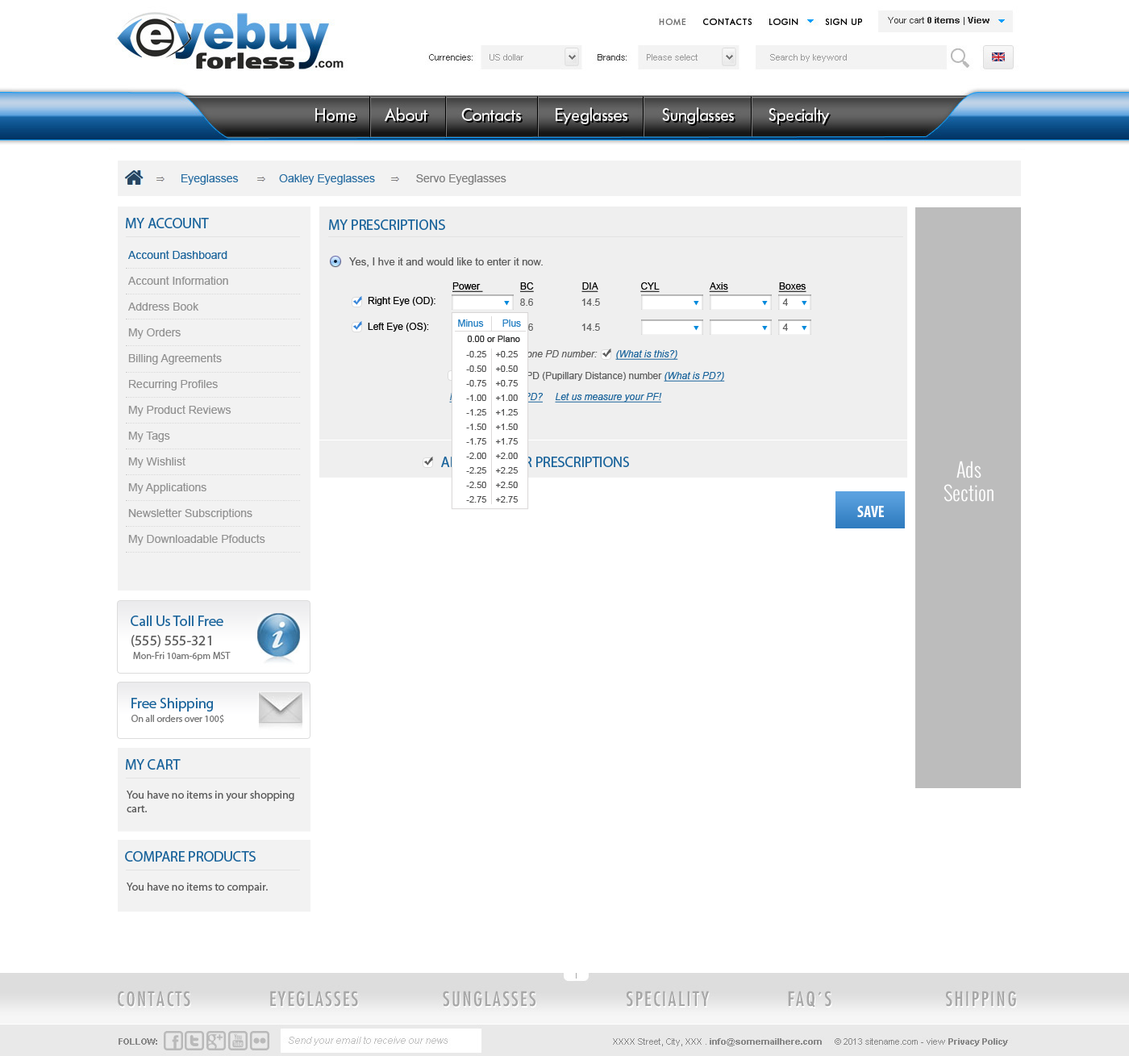
<style>
.page{position:relative;width:1129px;height:1056px;background:#ffffff}
.page>*{position:absolute;margin:0}
.t1{font:11.3px "ArialMT";color:#2b6fa3}
.t2{font:11.3px "ArialMT";color:#7f7f7f}
.t3{font:14.5px "MyriadPro-Regular";color:#1c659c;text-transform:uppercase}
.t4{font:11.3px/25.8px "ArialMT";color:#929292}
.t5{font:11.3px/25.8px "ArialMT";color:#1c659c}
.t6{font:10.5px "ArialMT";color:#5b5b5b}
.t7{font:9.7px "ArialMT";color:#000000;text-decoration:underline}
.t8{font:9.7px "ArialMT";color:#000000}
.t9{font:9.7px "ArialMT";color:#5d5d5d}
.t10{font:9.7px "ArialMT";color:#217dc1}
.t11{font:9.7px "ArialMT";color:#217dc2}
.t12{font:9.7px "ArialMT"}
.t13{font:8.9px "ArialMT";color:#2a2a2a}
.t14{font:9.7px "Arial-ItalicMT"}
.t15{font:8.9px/14.5px "ArialMT";color:#515151}
.t16{font:8.9px/14.5px "ArialMT";color:#505050}
.t17{font:9.7px "Arial-ItalicMT";color:#1c659c;text-decoration:underline}
.t18{font:19.4px "Oswald-Light";color:#ffffff}
.t19{font:16.1px "MyriadPro-BoldCond";color:#ffffff;text-transform:uppercase}
.t20{font:14.5px "MyriadPro-Regular";color:#1c659c}
.t21{font:14.5px "MyriadPro-Regular";color:#5a5a5a}
.t22{font:9.7px "MyriadPro-Regular";color:#797979}
.t23{font:11.3px "MyriadPro-Regular";color:#5a5a5a}
</style>
<div class="page">
<p class="t1" style="left:181px;top:174px;width:326px;height:11px">Eyeglasses             Oakley Eyeglasses             <span class="t2">Servo Eyeglasses</span></p>
<p class="t3" style="left:126px;top:218px;width:83px;height:10px">My Account</p>
<p class="t3" style="left:329px;top:219px;width:116px;height:11px">My Prescriptions</p>
<p class="t4" style="left:128px;top:250px;width:137px;height:295px"><span class="t5">Account Dashboard<br></span>Account Information<br>Address Book<br>My Orders<br>Billing Agreements<br>Recurring Profiles<br>My Product Reviews<br>My Tags<br>My Wishlist<br>My Applications<br>Newsletter Subscriptions<br>My Downloadable Pfoducts</p>
<p class="t6" style="left:349px;top:257px;width:194px;height:10px">Yes, I hve it and would like to enter it now.</p>
<p class="t7" style="left:453px;top:282px;width:354px;height:10px">Power               BC                  DIA                CYL                   Axis                   Boxes</p>
<p class="t8" style="left:368px;top:297px;width:68px;height:9px">Right Eye (OD):</p>
<p class="t9" style="left:520px;top:298px;width:13px;height:8px">8.6</p>
<p class="t9" style="left:582px;top:298px;width:18px;height:8px">14.5</p>
<p class="t9" style="left:782px;top:298px;width:6px;height:8px">4</p>
<p class="t8" style="left:368px;top:323px;width:61px;height:9px">Left Eye (OS):</p>
<p class="t10" style="left:458px;top:319px;width:63px;height:8px">Minus       <span class="t11">Plus</span></p>
<p class="t12" style="left:520px;top:323px;width:13px;height:8px">8.6</p>
<p class="t9" style="left:582px;top:323px;width:18px;height:8px">14.5</p>
<p class="t9" style="left:782px;top:323px;width:6px;height:8px">4</p>
<p class="t13" style="left:467px;top:336px;width:53px;height:6px">0.00 or Plano</p>
<p class="t14" style="left:452px;top:350px;width:146px;height:7px">I have more than one PD number:</p>
<p class="t15" style="left:466px;top:351px;width:20px;height:152px;text-align:right">-0.25<br>-0.50<br>-0.75<br>-1.00<br>-1.25<br>-1.50<br>-1.75<br>-2.00<br>-2.25<br>-2.50<br>-2.75</p>
<p class="t16" style="left:496px;top:351px;width:22px;height:152px">+0.25<br>+0.50<br>+0.75<br>+1.00<br>+1.25<br>+1.50<br>+1.75<br>+2.00<br>+2.25<br>+2.50<br>+2.75</p>
<p class="t17" style="left:615px;top:350px;width:63px;height:10px">(What is this?)</p>
<p class="t9" style="left:464px;top:372px;width:198px;height:9px">I don'have my PD (Pupillary Distance) number</p>
<p class="t17" style="left:664px;top:372px;width:61px;height:10px">(What is PD?)</p>
<p class="t17" style="left:555px;top:393px;width:107px;height:10px">Let us measure your PF!</p>
<p class="t3" style="left:441px;top:457px;width:188px;height:10px">Add another Prescriptions</p>
<p class="t18" style="left:944px;top:461px;width:50px;height:41px;text-align:center">Ads<br>Section</p>
<p class="t19" style="left:857px;top:506px;width:27px;height:11px">Save</p>
<p class="t20" style="left:131px;top:615px;width:92px;height:11px">Call Us Toll Free</p>
<p class="t21" style="left:131px;top:635px;width:80px;height:12px">(555) 555-321</p>
<p class="t22" style="left:133px;top:652px;width:98px;height:9px">Mon-Fri 10am-6pm MST</p>
<p class="t20" style="left:131px;top:698px;width:82px;height:13px">Free Shipping</p>
<p class="t22" style="left:131px;top:714px;width:93px;height:10px">On all orders over 100$</p>
<p class="t3" style="left:126px;top:759px;width:55px;height:11px">My Cart</p>
<p class="t23" style="left:127px;top:791px;width:167px;height:21px">You have no items in your shopping cart.</p>
<p class="t3" style="left:125px;top:851px;width:131px;height:10px">Compare products</p>
<p class="t23" style="left:127px;top:882px;width:141px;height:11px">You have no items to compair.</p>
</div>
